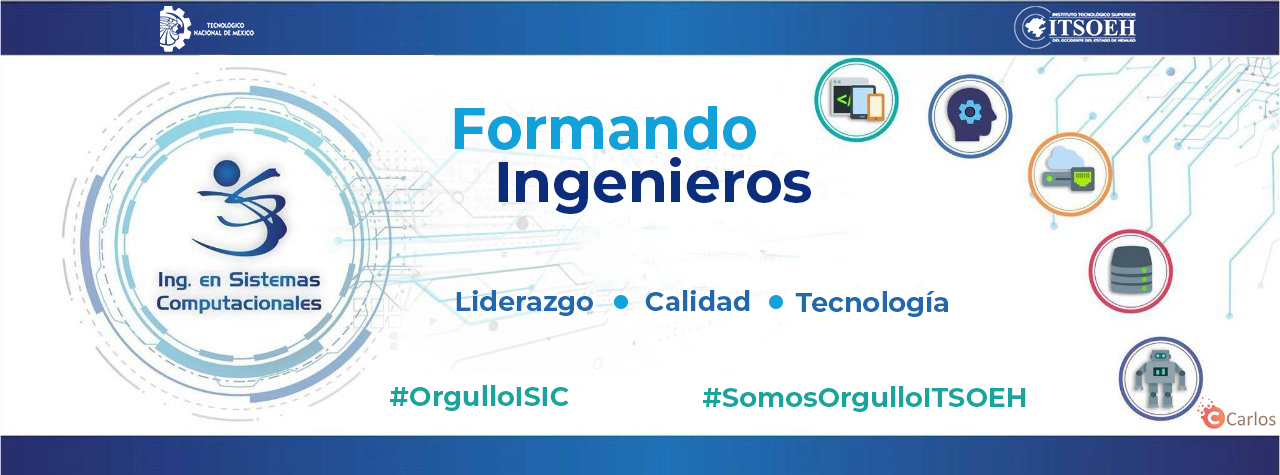
<style>
.page{position:relative;width:1280px;height:475px;background:#ffffff}
.page>*{position:absolute;margin:0}
.t1{font:58.6px "Montserrat-Bold";color:#12a1d9}
.t2{font:57.3px "Montserrat-Bold";color:#0c2d7b}
.t3{font:27.1px "Montserrat-Bold";color:#2168ac}
.t4{font:27.1px "Montserrat-Bold";color:#19a59e}
</style>
<div class="page">
<p class="t1" style="left:454px;top:106px;width:302px;height:44px">Formando</p>
<p class="t2" style="left:498px;top:157px;width:313px;height:57px">Ingenieros</p>
<p class="t3" style="left:456px;top:290px;width:137px;height:26px">Liderazgo</p>
<p class="t3" style="left:645px;top:290px;width:105px;height:21px">Calidad</p>
<p class="t3" style="left:795px;top:291px;width:153px;height:26px">Tecnología</p>
<p class="t4" style="left:390px;top:385px;width:179px;height:26px">#OrgulloISIC</p>
<p class="t4" style="left:703px;top:386px;width:323px;height:26px">#SomosOrgulloITSOEH</p>
</div>
